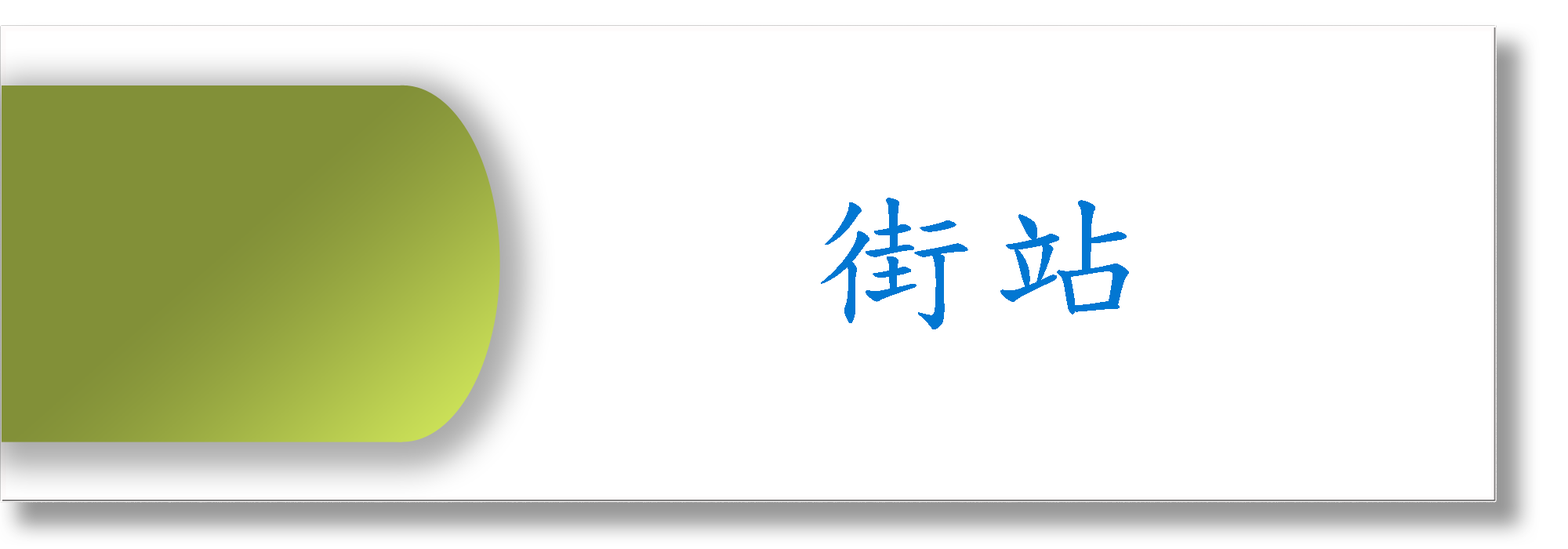
<style>
.page{position:relative;width:1568px;height:549px;background:#ffffff}
.page>*{position:absolute;margin:0}
.t1{font:156.8px "DFKaiShu-SB-Estd-BF";letter-spacing:0.08em;color:#0277d2}
</style>
<div class="page">
<p class="t1" style="left:821px;top:198px;width:308px;height:131px">街站</p>
</div>
